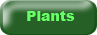
<style>
.page{position:relative;width:97px;height:35px;background:#276027}
.page>*{position:absolute;margin:0}
.t1{font:14px "Arial-Black";color:#66ff66}
</style>
<div class="page">
<p class="t1" style="left:27px;top:11px;width:48px;height:10px">Plants</p>
</div>
